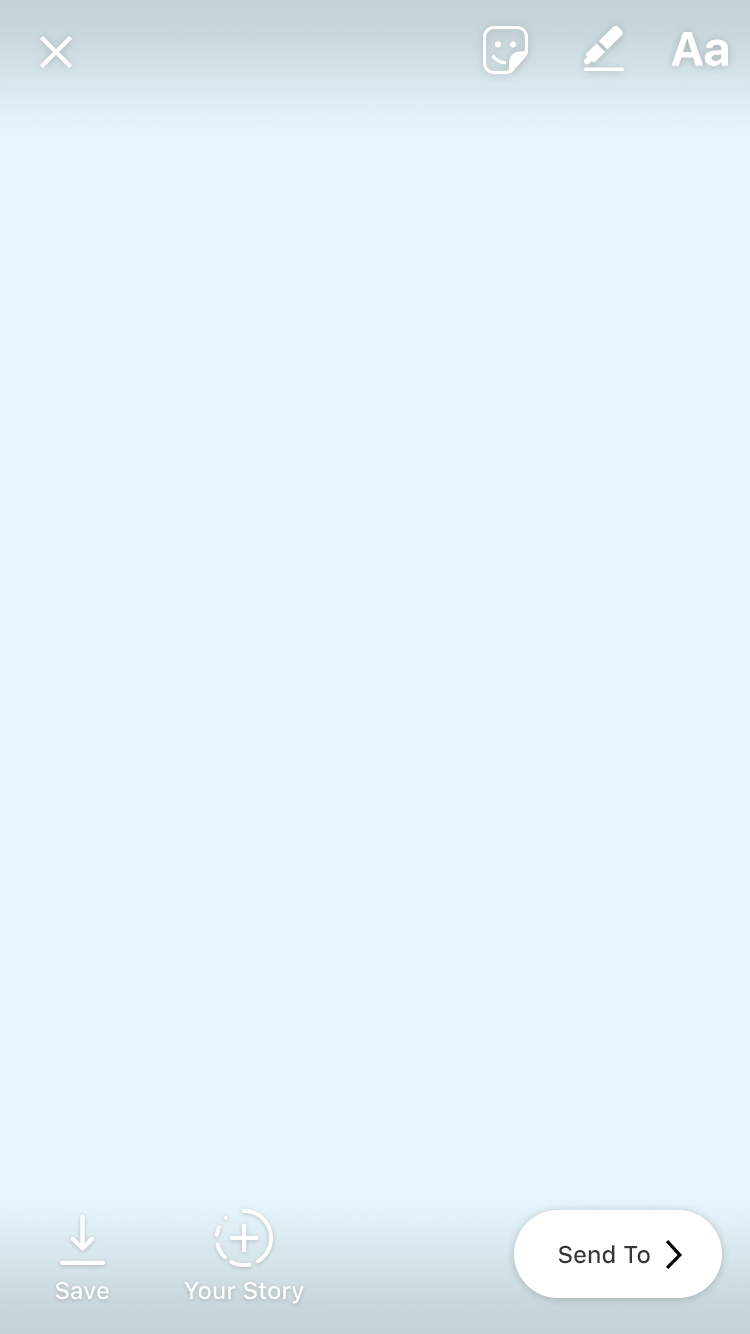
<style>
.page{position:relative;width:750px;height:1334px;background:#e6f6fc}
.page>*{position:absolute;margin:0}
.t1{font:24px "SFUIText-Medium";color:#363636}
.t2{font:24px "SFUIText-Medium";color:#ffffff}
</style>
<div class="page">
<p class="t1" style="left:558px;top:1245px;width:92px;height:19px">Send To</p>
<p class="t2" style="left:55px;top:1281px;width:54px;height:19px">Save</p>
<p class="t2" style="left:184px;top:1281px;width:120px;height:23px">Your Story</p>
</div>
